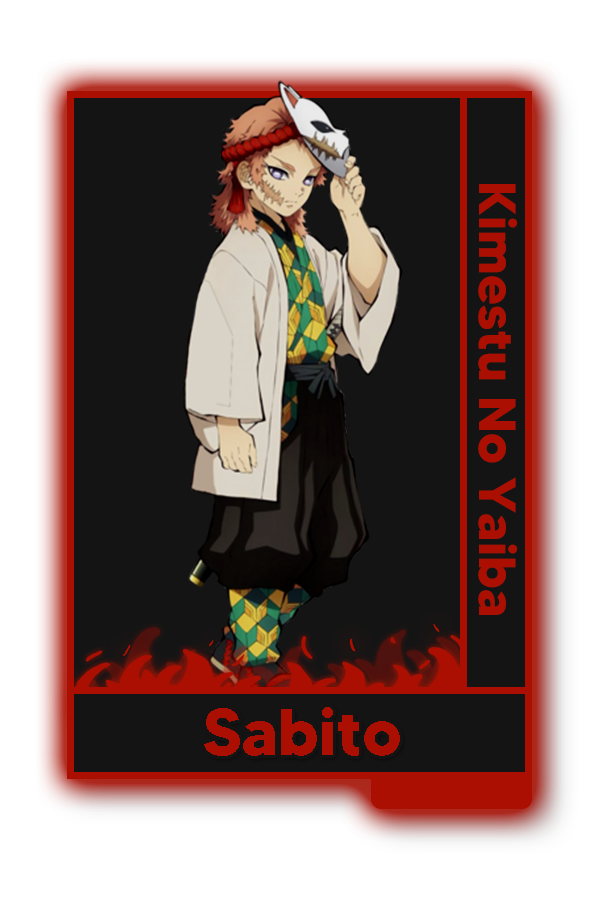
<style>
.page{position:relative;width:600px;height:900px;background:#141414}
.page>*{position:absolute;margin:0}
.t1{font:52px "MADETOMMY-Bold";color:#ab0f01}
.t2{font:65.2px "MADETOMMY-Bold";color:#ab0f01}
</style>
<div class="page">
<p class="t1" style="left:478px;top:184px;width:40px;height:431px;rotate:90deg">Kimestu No Yaiba</p>
<p class="t2" style="left:204px;top:707px;width:196px;height:49px">Sabito</p>
</div>
